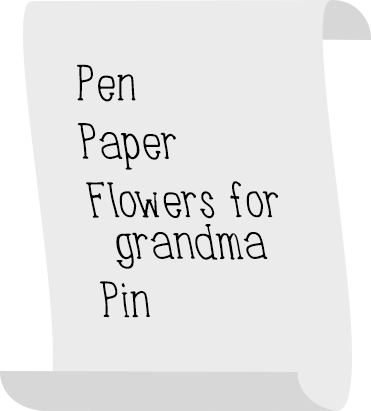
<style>
.page{position:relative;width:371px;height:411px;background:#ebebeb}
.page>*{position:absolute;margin:0}
.t1{font:50px/58.3px "BeforeBreakfast-Medium";color:#000000}
.t2{font:50px/41.7px "BeforeBreakfast-Medium";color:#000000}
</style>
<div class="page">
<p class="t1" style="left:76px;top:64px;width:203px;height:254px">Pen<br>Paper<br>Flowers for <span class="t2">grandma<br></span>Pin</p>
</div>
